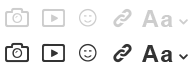
<style>
.page{position:relative;width:190px;height:70px;background:#ffffff}
.page>*{position:absolute;margin:0}
.t1{font:23px "Arial-BoldMT";letter-spacing:0.075em;color:#cdcdcd}
.t2{font:23px "Arial-BoldMT";letter-spacing:0.075em;color:#333333}
</style>
<div class="page">
<p class="t1" style="left:142px;top:10px;width:31px;height:17px">Aa</p>
<p class="t2" style="left:142px;top:45px;width:31px;height:17px">Aa</p>
</div>
